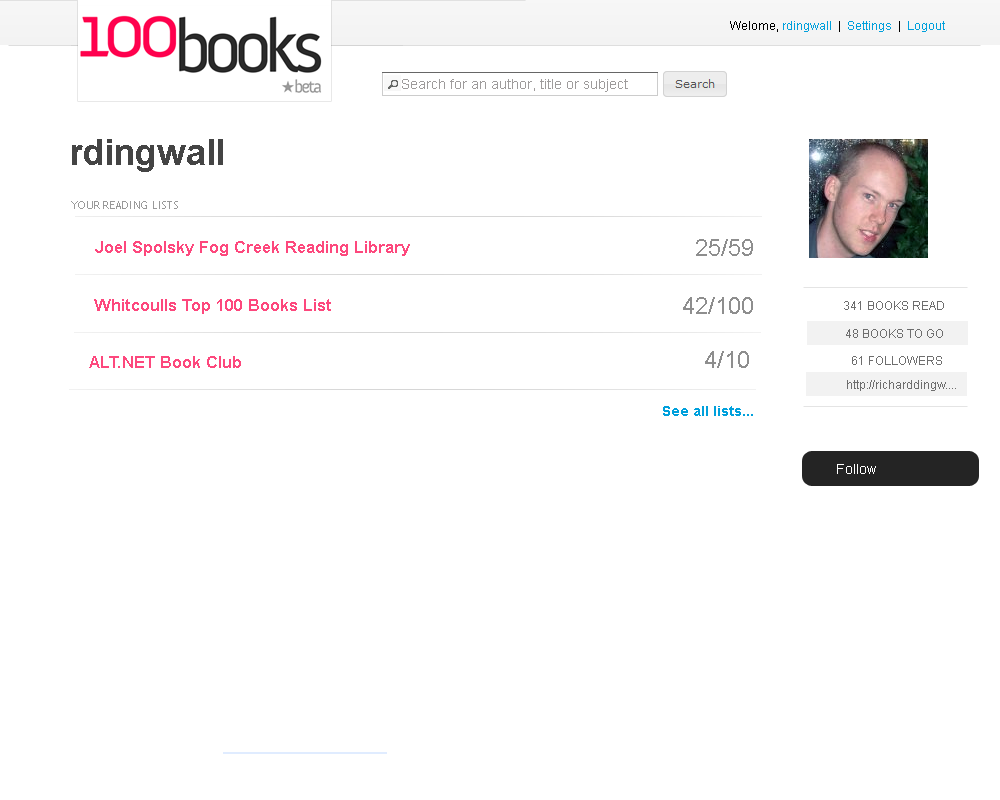
<style>
.page{position:relative;width:1000px;height:800px;background:#ffffff}
.page>*{position:absolute;margin:0}
.t1{font:12px "ArialMT";color:#00a0dc}
.t2{font:12px "ArialMT";color:#000000}
.t3{font:14px "ArialMT";color:#9e9b9b}
.t4{font:36px "Arial-BoldMT";color:#444444}
.t5{font:11px "TrebuchetMS";letter-spacing:0.025em;color:#999999}
.t6{font:17px "Arial-BoldMT";color:#fd487d}
.t7{font:24px "ArialMT";color:#8e8e8e}
.t8{font:12px "ArialMT";color:#6e6e6e}
.t9{font:14px "Arial-BoldMT";color:#00a0dc}
.t10{font:14px "ArialMT";color:#ffffff}
</style>
<div class="page">
<p class="t1" style="left:730px;top:21px;width:215px;height:11px"><span class="t2">Welome, </span>rdingwall  <span class="t2">|  </span>Settings  <span class="t2">|  </span>Logout</p>
<p class="t3" style="left:402px;top:79px;width:226px;height:13px">Search for an author, title or subject</p>
<p class="t4" style="left:72px;top:139px;width:151px;height:33px">rdingwall</p>
<p class="t5" style="left:71px;top:201px;width:107px;height:8px">YOUR READING LISTS</p>
<p class="t6" style="left:95px;top:241px;width:315px;height:15px">Joel Spolsky Fog Creek Reading Library</p>
<p class="t7" style="left:696px;top:239px;width:57px;height:17px">25/59</p>
<p class="t6" style="left:94px;top:299px;width:237px;height:15px">Whitcoulls Top 100 Books List</p>
<p class="t7" style="left:683px;top:297px;width:70px;height:17px">42/100</p>
<p class="t8" style="left:844px;top:301px;width:100px;height:9px">341 BOOKS READ</p>
<p class="t8" style="left:846px;top:329px;width:97px;height:9px">48 BOOKS TO GO</p>
<p class="t7" style="left:705px;top:351px;width:44px;height:17px">4/10</p>
<p class="t6" style="left:89px;top:356px;width:152px;height:12px">ALT.NET Book Club</p>
<p class="t8" style="left:852px;top:356px;width:90px;height:9px">61 FOLLOWERS</p>
<p class="t8" style="left:847px;top:380px;width:109px;height:11px">http://richarddingw....</p>
<p class="t9" style="left:663px;top:406px;width:90px;height:10px">See all lists...</p>
<p class="t10" style="left:837px;top:464px;width:39px;height:10px">Follow</p>
</div>
